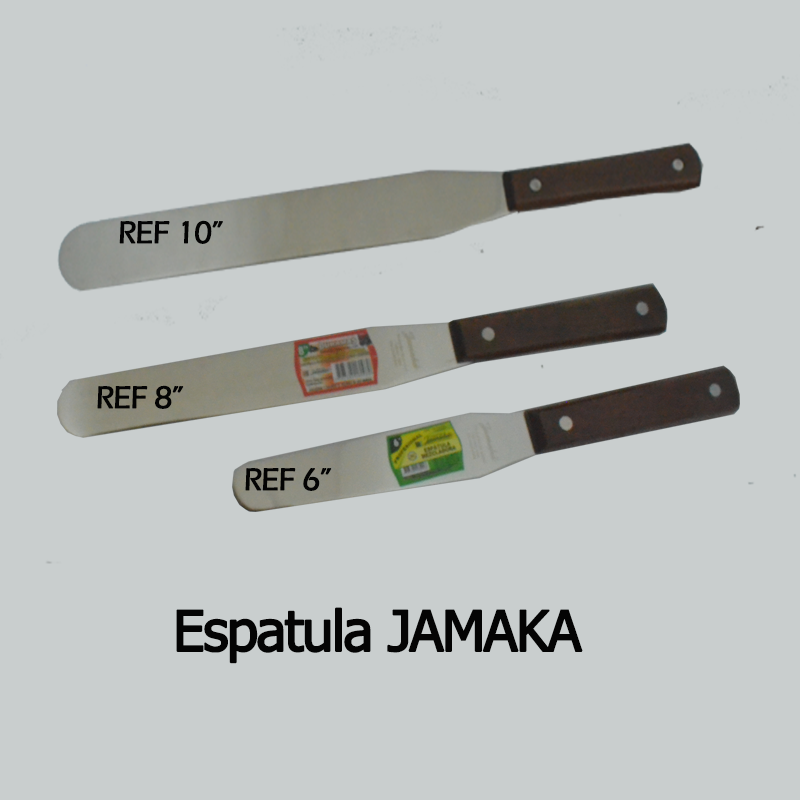
<style>
.page{position:relative;width:800px;height:800px;background:#c9cece}
.page>*{position:absolute;margin:0}
.t1{font:32px "ErasITC-Medium";letter-spacing:-0.05em;color:#040404;font-weight:bold}
.t2{font:56px "Tahoma";letter-spacing:-0.05em;color:#040404;font-weight:bold}
</style>
<div class="page">
<p class="t1" style="left:119px;top:220px;width:104px;height:24px">REF 10”</p>
<p class="t1" style="left:97px;top:385px;width:87px;height:24px">REF 8”</p>
<p class="t1" style="left:245px;top:468px;width:87px;height:23px">REF 6”</p>
<p class="t2" style="left:176px;top:607px;width:407px;height:57px">Espatula JAMAKA</p>
</div>
